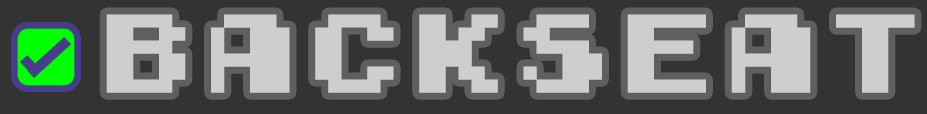
<style>
.page{position:relative;width:927px;height:114px;background:#333333}
.page>*{position:absolute;margin:0}
.t1{font:104.2px "GamegirlClassic";color:#cecece}
</style>
<div class="page">
<p class="t1" style="left:106px;top:14px;width:809px;height:79px">backseat</p>
</div>
